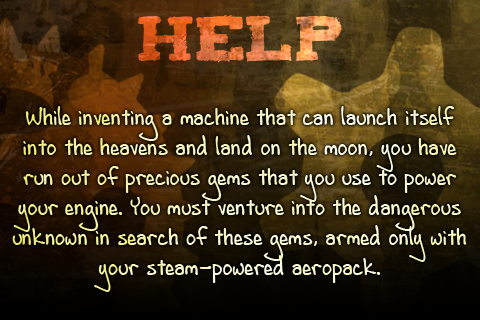
<style>
.page{position:relative;width:480px;height:320px}
.page>*{position:absolute;margin:0}
.t1{font:25px "AndrewScript16";color:#cddfa7}
</style>
<div class="page">
<p class="t1" style="left:12px;top:106px;width:455px;height:186px;text-align:center">While inventing a machine that can launch itself<br>into the heavens and land on the moon, you have<br>run out of precious gems that you use to power<br>your engine. You must venture into the dangerous<br>unknown in search of these gems, armed only with<br>your steam-powered aeropack.</p>
</div>
